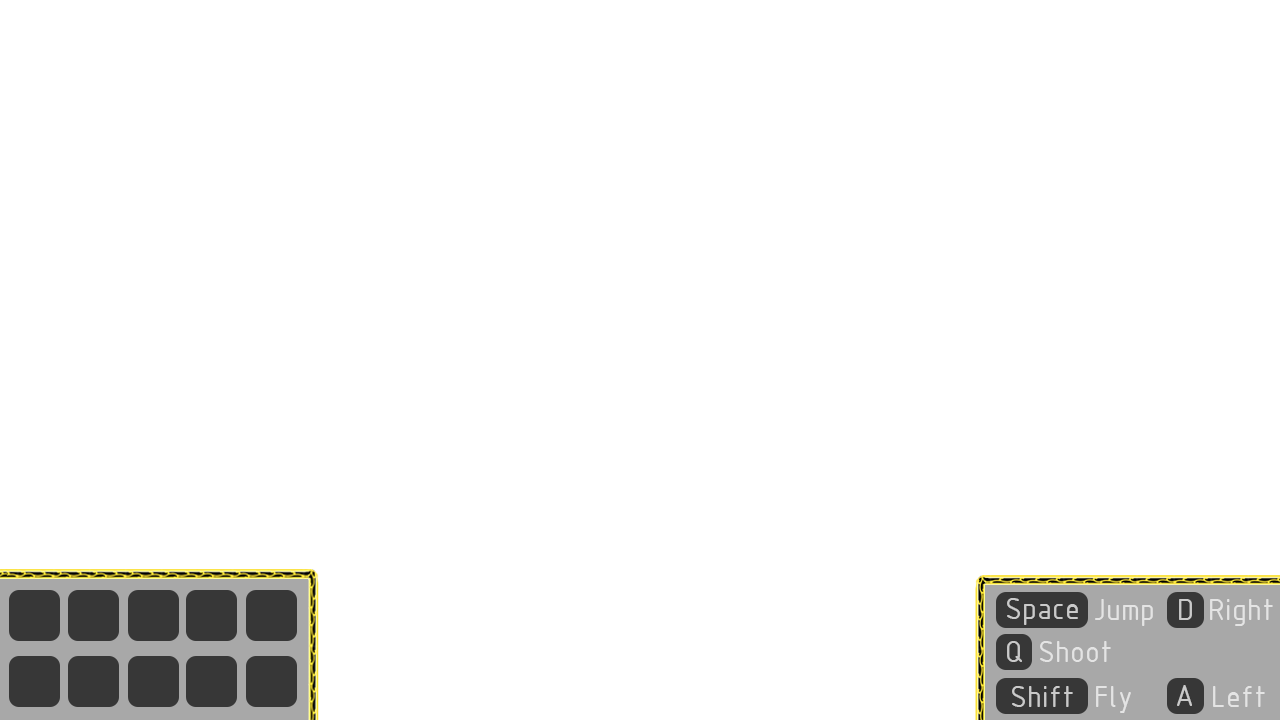
<style>
.page{position:relative;width:1280px;height:720px;background:#ffffff}
.page>*{position:absolute;margin:0}
.t1{font:33.3px "ISOCPEUR";color:#cacaca}
.t2{font:33.3px "ISOCPEUR";color:#e4e4e4}
</style>
<div class="page">
<p class="t1" style="left:1007px;top:598px;width:71px;height:27px">Space</p>
<p class="t2" style="left:1095px;top:599px;width:58px;height:27px">Jump</p>
<p class="t1" style="left:1179px;top:599px;width:13px;height:21px">D</p>
<p class="t2" style="left:1210px;top:599px;width:63px;height:27px">Right</p>
<p class="t1" style="left:1007px;top:641px;width:15px;height:21px">Q</p>
<p class="t2" style="left:1040px;top:641px;width:71px;height:21px">Shoot</p>
<p class="t1" style="left:1012px;top:686px;width:61px;height:21px">Shift</p>
<p class="t2" style="left:1096px;top:686px;width:35px;height:27px">Fly</p>
<p class="t1" style="left:1177px;top:685px;width:15px;height:21px">A</p>
<p class="t2" style="left:1213px;top:686px;width:52px;height:21px">Left</p>
</div>
